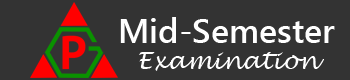
<style>
.page{position:relative;width:350px;height:80px;background:#333333}
.page>*{position:absolute;margin:0}
.t1{font:34px "SegoeUI-Semibold";color:#ffffff}
.t2{font:24px "LucidaHandwriting-Italic";color:#ffffff}
</style>
<div class="page">
<p class="t1" style="left:120px;top:17px;width:215px;height:26px">Mid-Semester</p>
<p class="t2" style="left:139px;top:52px;width:185px;height:19px">Examination</p>
</div>
